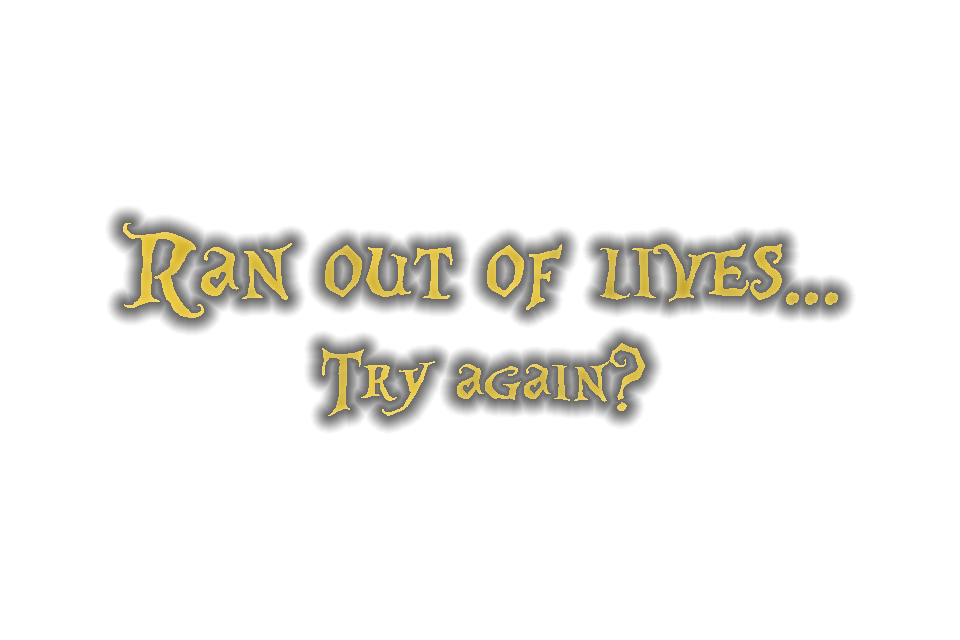
<style>
.page{position:relative;width:960px;height:640px;background:#ffffff}
.page>*{position:absolute;margin:0}
.t1{font:129.1px/97.9px "AliceinWonderland";color:#e2c650}
.t2{font:92.1px/97.9px "AliceinWonderland";color:#e2c650}
</style>
<div class="page">
<p class="t1" style="left:123px;top:223px;width:715px;height:193px;text-align:center">Ran out of lives...<br><span class="t2">Try again?</span></p>
</div>
